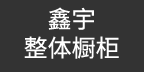
<style>
.page{position:relative;width:144px;height:72px;background:#333333}
.page>*{position:absolute;margin:0}
.t1{font:24px "NotoSansCJKtc-Regular";color:#ffffff}
</style>
<div class="page">
<p class="t1" style="left:24px;top:7px;width:95px;height:52px;text-align:center">鑫宇<br>整体橱柜</p>
</div>
